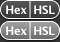
<style>
.page{position:relative;width:60px;height:42px}
.page>*{position:absolute;margin:0}
.t1{font:11.5px "LucidaGrande-Bold";letter-spacing:-0.025em;color:#ffffff}
</style>
<div class="page">
<p class="t1" style="left:6px;top:5px;width:21px;height:9px">Hex</p>
<p class="t1" style="left:34px;top:5px;width:21px;height:9px">HSL</p>
<p class="t1" style="left:6px;top:26px;width:21px;height:9px">Hex</p>
<p class="t1" style="left:34px;top:26px;width:21px;height:9px">HSL</p>
</div>
